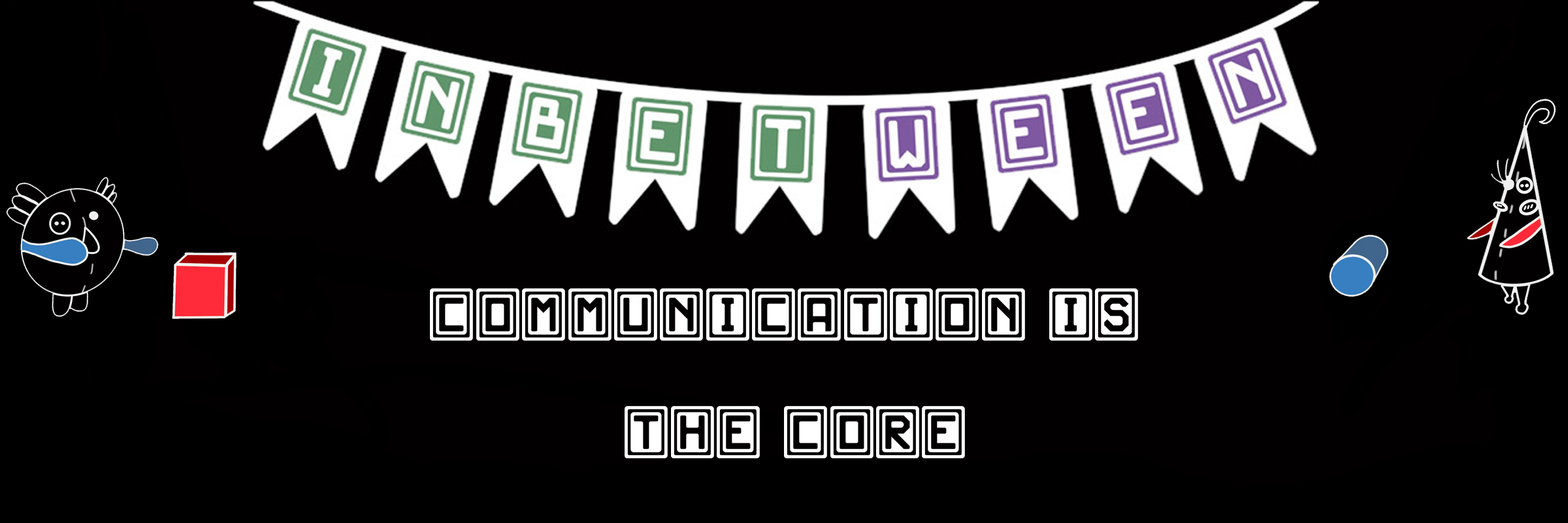
<style>
.page{position:relative;width:1568px;height:523px;background:#020001}
.page>*{position:absolute;margin:0}
.t1{font:98.1px "JD-Scarabeo";color:#ffffff}
</style>
<div class="page">
<p class="t1" style="left:430px;top:288px;width:708px;height:170px;text-align:center">Communication is <br>the core</p>
</div>
